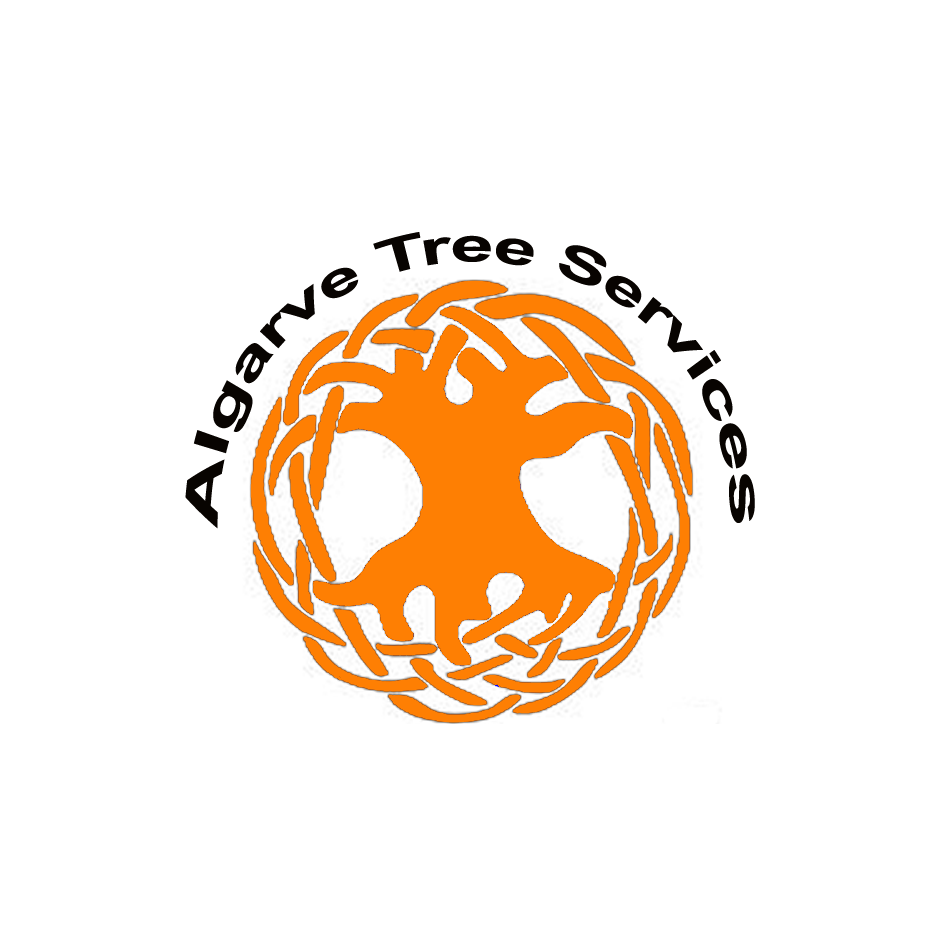
<style>
.page{position:relative;width:945px;height:945px;background:#ffffff}
.page>*{position:absolute;margin:0}
.t1{font:47.9px "Arial-BoldMT";color:#080401;scale:0.96 1}
</style>
<div class="page">
<p class="t1" style="left:185px;top:232px;width:570px;height:297px;text-align:center">Algarve Tree Services</p>
</div>
